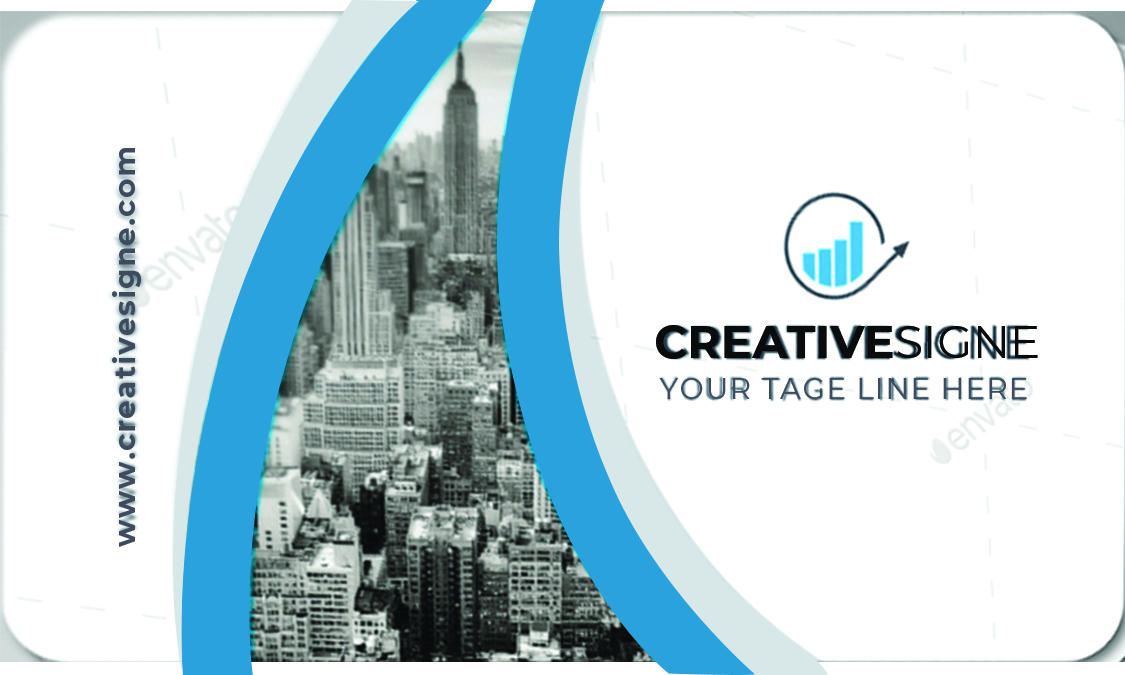
<style>
.page{position:relative;width:1125px;height:675px;background:#ffffff}
.page>*{position:absolute;margin:0}
.t1{font:29.2px "Montserrat-Bold";letter-spacing:0.05em;color:#3e4b5f}
.t2{font:45.8px "Montserrat-Bold";color:#090b0c}
.t3{font:45.8px "Montserrat-Regular";color:#090b0c}
.t4{font:29.2px "Montserrat-Regular";letter-spacing:0.05em;color:#3e4b5f}
</style>
<div class="page">
<p class="t1" style="left:112px;top:148px;width:29px;height:399px;rotate:-90deg">www.creativesigne.com</p>
<p class="t2" style="left:656px;top:325px;width:382px;height:34px">CREATIVE<span class="t3">SIGNE</span></p>
<p class="t4" style="left:659px;top:378px;width:368px;height:21px">YOUR TAGE LINE HERE</p>
</div>
